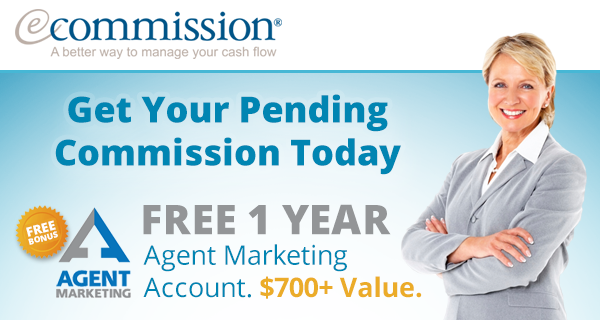
<style>
.page{position:relative;width:600px;height:320px}
.page>*{position:absolute;margin:0}
.t1{font:36px "OpenSans-Extrabold";color:#0085b2}
.t2{font:41.1px "OpenSans-Extrabold";color:#939597}
.t3{font:8.2px/7.8px "OpenSans-Extrabold";color:#ffffff}
.t4{font:12.9px/7.8px "OpenSans-Extrabold";color:#ffffff}
.t5{font:26.9px "OpenSans";color:#0085b2}
.t6{font:26.9px "OpenSans-Bold";color:#ebac29}
</style>
<div class="page">
<p class="t1" style="left:55px;top:94px;width:346px;height:81px;text-align:center">Get Your Pending<br>Commission Today</p>
<p class="t2" style="left:143px;top:204px;width:248px;height:31px">FREE 1 YEAR</p>
<p class="t3" style="left:26px;top:220px;width:32px;height:25px;text-align:center;rotate:-15deg"><span class="t4">FREE<br></span>BONUS</p>
<p class="t5" style="left:143px;top:244px;width:279px;height:55px">Agent Marketing<br>Account. <span class="t6">$700+ Value.</span></p>
</div>
